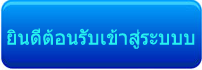
<style>
.page{position:relative;width:202px;height:70px}
.page>*{position:absolute;margin:0}
.t1{font:20px "Tahoma";color:#26f1ef}
</style>
<div class="page">
<p class="t1" style="left:7px;top:28px;width:188px;height:21px">ยินดีต้อนรับเข้าสู่ระบบบ</p>
</div>
